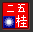
<style>
.page{position:relative;width:33px;height:32px;background:#f20000}
.page>*{position:absolute;margin:0}
.t1{font:10.4px "SimSun";color:#ffffff}
.t2{font:11.7px "SimSun";color:#ffffff}
</style>
<div class="page">
<p class="t1" style="left:7px;top:4px;width:18px;height:8px">二五</p>
<p class="t2" style="left:16px;top:15px;width:11px;height:12px">桂</p>
</div>
